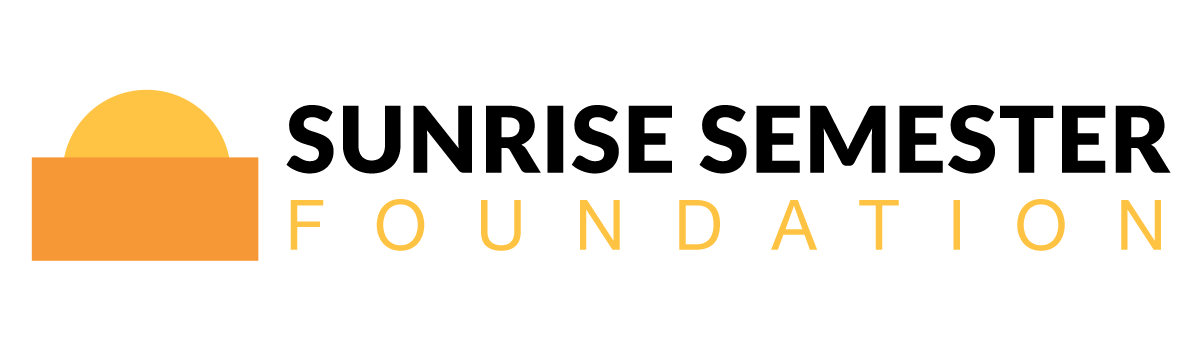
<style>
.page{position:relative;width:1195px;height:339px;background:#ffffff}
.page>*{position:absolute;margin:0}
.t1{font:92px "Lato-Black";letter-spacing:0.01em;color:#000000}
.t2{font:69.6px "HelveticaNeue";letter-spacing:0.7em;color:#ffc343}
</style>
<div class="page">
<p class="t1" style="left:286px;top:105px;width:885px;height:69px">SUNRISE SEMESTER</p>
<p class="t2" style="left:290px;top:199px;width:871px;height:52px">FOUNDATION</p>
</div>
